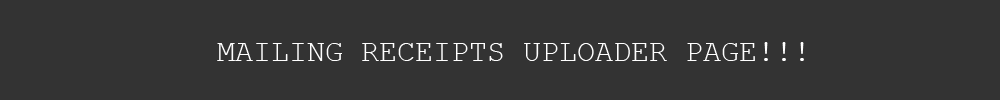
<style>
.page{position:relative;width:1000px;height:100px;background:#333333}
.page>*{position:absolute;margin:0}
.t1{font:30px "CourierNewPSMT";color:#ffffff}
</style>
<div class="page">
<p class="t1" style="left:217px;top:42px;width:587px;height:19px">MAILING RECEIPTS UPLOADER PAGE!!!</p>
</div>
